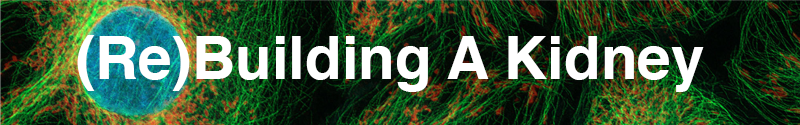
<style>
.page{position:relative;width:800px;height:125px}
.page>*{position:absolute;margin:0}
.t1{font:60px "Helvetica-Bold";color:#ffffff}
</style>
<div class="page">
<p class="t1" style="left:77px;top:35px;width:627px;height:57px">(Re)Building A Kidney</p>
</div>
